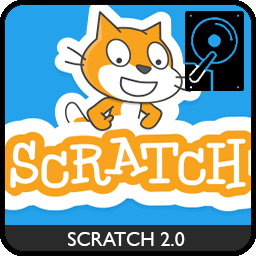
<style>
.page{position:relative;width:256px;height:256px;background:#ffffff}
.page>*{position:absolute;margin:0}
.t1{font:20px "GillSansMT";color:#ffffff}
</style>
<div class="page">
<p class="t1" style="left:68px;top:232px;width:117px;height:14px">SCRATCH 2.0</p>
</div>
